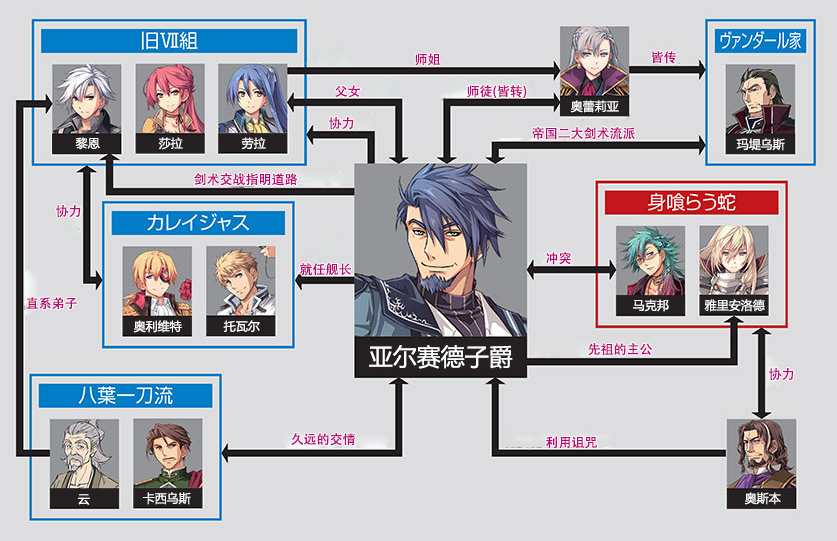
<style>
.page{position:relative;width:837px;height:541px;background:#dddddf}
.page>*{position:absolute;margin:0}
.t1{font:13px "AdobeHeitiStd-Regular";color:#b70773}
.t2{font:12px "MicrosoftYaHei";color:#ffffff}
.t3{font:24px "MicrosoftYaHei";color:#ffffff}
</style>
<div class="page">
<p class="t1" style="left:415px;top:53px;width:26px;height:13px">师姐</p>
<p class="t1" style="left:652px;top:51px;width:25px;height:13px">皆传</p>
<p class="t1" style="left:335px;top:85px;width:25px;height:13px">父女</p>
<p class="t1" style="left:467px;top:85px;width:60px;height:13px">师徒(皆转)</p>
<p class="t2" style="left:570px;top:100px;width:49px;height:13px">奥蕾莉亚</p>
<p class="t1" style="left:329px;top:117px;width:25px;height:13px">协力</p>
<p class="t2" style="left:75px;top:137px;width:25px;height:13px">黎恩</p>
<p class="t2" style="left:158px;top:137px;width:25px;height:13px">莎拉</p>
<p class="t2" style="left:242px;top:137px;width:24px;height:13px">劳拉</p>
<p class="t1" style="left:532px;top:127px;width:103px;height:13px">帝国二大剑术流派</p>
<p class="t2" style="left:736px;top:138px;width:49px;height:13px">玛堤乌斯</p>
<p class="t1" style="left:194px;top:173px;width:104px;height:13px">剑术交战指明道路</p>
<p class="t1" style="left:56px;top:205px;width:25px;height:13px">协力</p>
<p class="t1" style="left:546px;top:252px;width:25px;height:13px">冲突</p>
<p class="t1" style="left:299px;top:263px;width:52px;height:13px">就任舰长</p>
<p class="t1" style="left:26px;top:297px;width:51px;height:13px">直系弟子</p>
<p class="t2" style="left:633px;top:299px;width:36px;height:13px">马克邦</p>
<p class="t2" style="left:704px;top:299px;width:61px;height:13px">雅里安洛德</p>
<p class="t2" style="left:133px;top:320px;width:49px;height:13px">奥利维特</p>
<p class="t2" style="left:223px;top:320px;width:37px;height:12px">托瓦尔</p>
<p class="t3" style="left:369px;top:345px;width:144px;height:24px">亚尔赛德子爵</p>
<p class="t1" style="left:588px;top:343px;width:65px;height:13px">先祖的主公</p>
<p class="t1" style="left:769px;top:368px;width:25px;height:13px">协力</p>
<p class="t1" style="left:291px;top:433px;width:64px;height:13px">久远的交情</p>
<p class="t1" style="left:546px;top:436px;width:52px;height:13px">利用诅咒</p>
<p class="t2" style="left:78px;top:494px;width:12px;height:11px">云</p>
<p class="t2" style="left:143px;top:492px;width:48px;height:13px">卡西乌斯</p>
<p class="t2" style="left:744px;top:492px;width:37px;height:13px">奥斯本</p>
</div>
